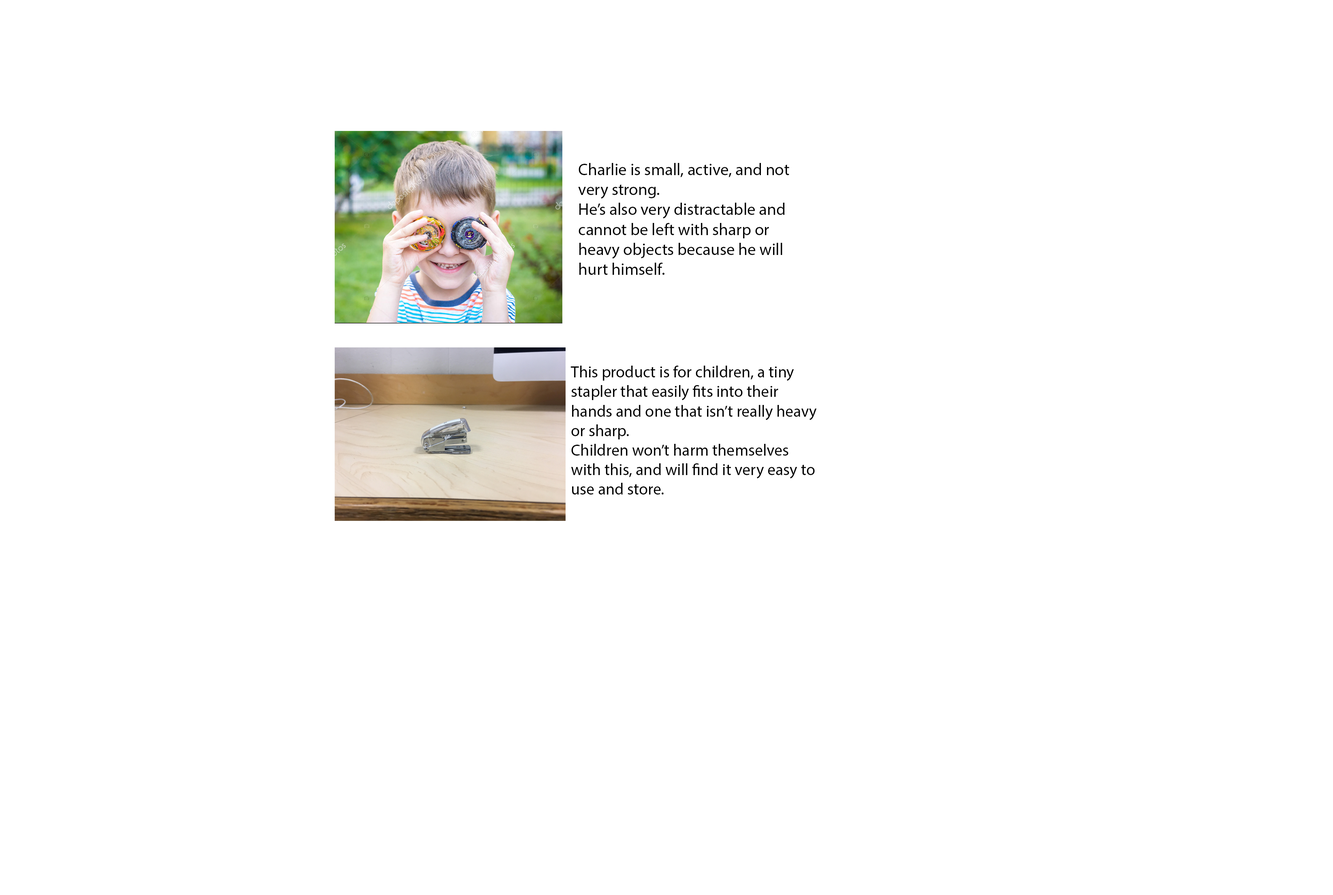
<style>
.page{position:relative;width:1333px;height:895px;background:#ffffff}
.page>*{position:absolute;margin:0}
.t1{font:16.6px "MyriadPro-Regular";color:#000000}
.t2{font:16.2px "MyriadPro-Regular";color:#000000}
</style>
<div class="page">
<p class="t1" style="left:578px;top:163px;width:211px;height:112px">Charlie is small, active, and not very strong. <br>He’s also very distractable and cannot be left with sharp or heavy objects because he will hurt himself.</p>
<p class="t2" style="left:570px;top:365px;width:247px;height:129px">This product is for children, a tiny stapler that easily fits into their hands and one that isn’t really heavy or sharp. <br>Children won’t harm themselves with this, and will find it very easy to use and store.</p>
</div>
